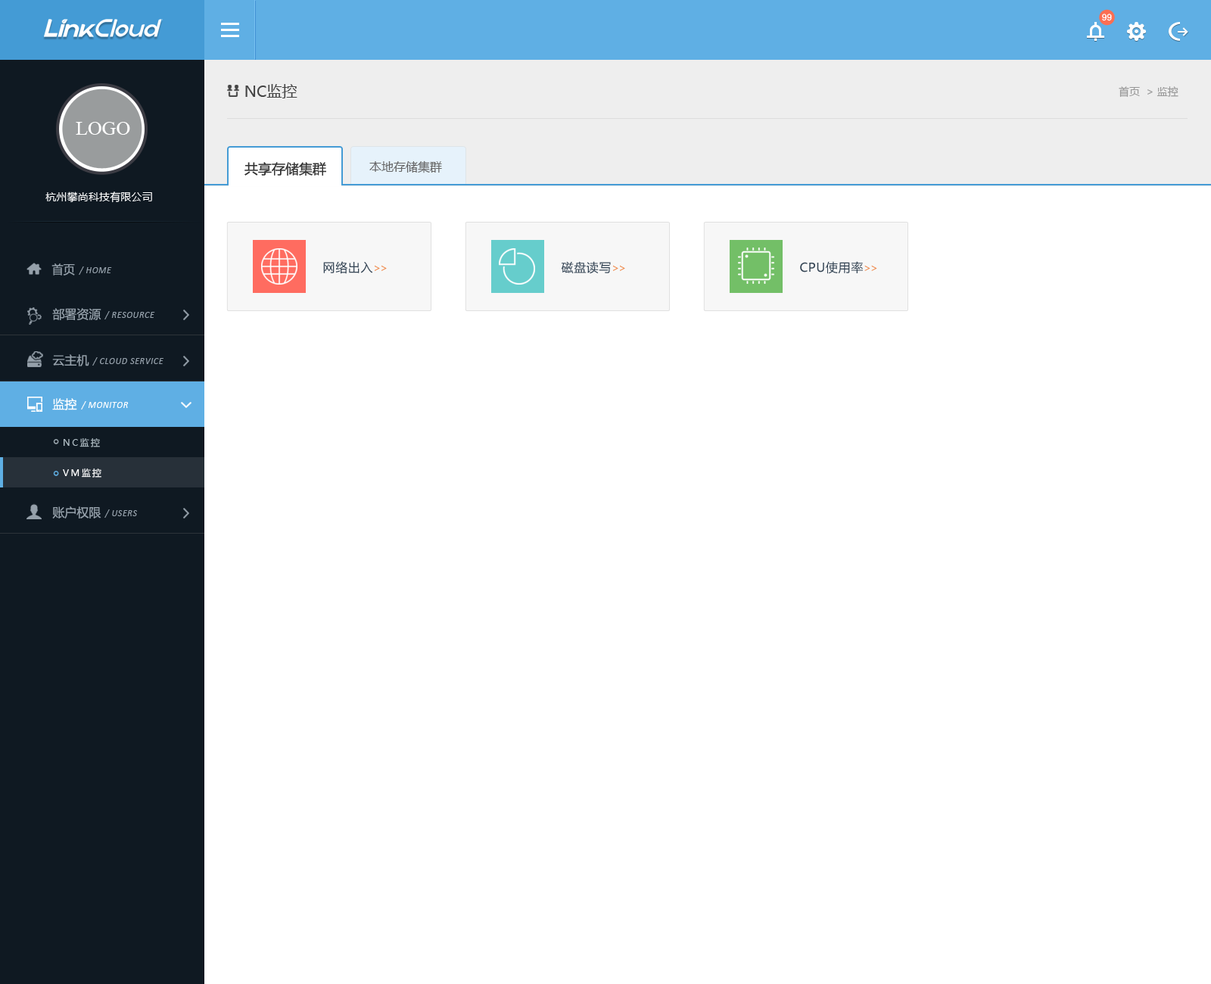
<style>
.page{position:relative;width:1211px;height:984px;background:#ffffff}
.page>*{position:absolute;margin:0}
.t1{font:9.1px "ArialMT";color:#ffffff}
.t2{font:15.1px "MicrosoftYaHei";color:#444444}
.t3{font:10.6px "MicrosoftYaHei";color:#999999}
.t4{font:19.7px "TimesNewRomanPSMT";color:#ffffff}
.t5{font:12.1px "MicrosoftYaHei";color:#666666}
.t6{font:13.6px "MicrosoftYaHei";color:#333333}
.t7{font:10.6px "MicrosoftYaHei";letter-spacing:0.01em;color:#ffffff}
.t8{font:12.1px "MicrosoftYaHei";color:#95a0aa;scale:0.96 1}
.t9{font:9.1px "Calibri-Italic";letter-spacing:0.05em;color:#95a0aa}
.t10{font:12.1px "MicrosoftYaHei";letter-spacing:0.04em;color:#334353}
.t11{font:10.6px "MicrosoftYaHei";letter-spacing:-0.1em;color:#ef8748}
.t12{font:12.1px "MicrosoftYaHei";color:#95a0aa}
.t13{font:9.1px "Calibri-Italic";letter-spacing:0.05em;color:#95a0aa;text-transform:uppercase}
.t14{font:12.1px "MicrosoftYaHei";color:#ffffff}
.t15{font:9.1px "Calibri-Italic";letter-spacing:0.05em;color:#ffffff;text-transform:uppercase}
.t16{font:9.1px "Calibri-Italic";letter-spacing:0.05em;color:#ffffff}
.t17{font:9.1px/30.3px "MicrosoftYaHei";letter-spacing:0.2em;color:#b0bdc4}
.t18{font:9.1px/30.3px "MicrosoftYaHei";letter-spacing:0.2em;color:#ffffff}
</style>
<div class="page">
<p class="t1" style="left:1102px;top:14px;width:10px;height:7px">99</p>
<p class="t2" style="left:245px;top:84px;width:53px;height:14px">NC监控</p>
<p class="t3" style="left:1119px;top:86px;width:60px;height:11px">首页  &gt; 监控</p>
<p class="t4" style="left:76px;top:122px;width:54px;height:13px">LOGO</p>
<p class="t5" style="left:369px;top:161px;width:73px;height:12px">本地存储集群</p>
<p class="t6" style="left:245px;top:162px;width:81px;height:14px">共享存储集群</p>
<p class="t7" style="left:45px;top:192px;width:107px;height:11px">杭州攀尚科技有限公司</p>
<p class="t8" style="left:51px;top:263px;width:24px;height:13px">首页</p>
<p class="t9" style="left:79px;top:267px;width:33px;height:8px">/ HOME</p>
<p class="t10" style="left:323px;top:261px;width:64px;height:13px">网络出入<span class="t11">&gt;&gt;</span></p>
<p class="t10" style="left:561px;top:261px;width:64px;height:13px">磁盘读写<span class="t11">&gt;&gt;</span></p>
<p class="t10" style="left:800px;top:261px;width:78px;height:13px">CPU使用率<span class="t11">&gt;&gt;</span></p>
<p class="t12" style="left:52px;top:308px;width:49px;height:12px">部署资源</p>
<p class="t13" style="left:104px;top:311px;width:51px;height:9px"><span class="t9">/ </span>resource</p>
<p class="t12" style="left:52px;top:354px;width:37px;height:12px">云主机</p>
<p class="t13" style="left:92px;top:357px;width:72px;height:9px"><span class="t9">/ </span>cloud service</p>
<p class="t14" style="left:52px;top:398px;width:25px;height:12px">监控</p>
<p class="t15" style="left:81px;top:401px;width:48px;height:9px"><span class="t16">/ </span>monitor</p>
<p class="t17" style="left:63px;top:438px;width:38px;height:40px">NC监控<br><span class="t18">VM监控<br></span>基础资源</p>
<p class="t12" style="left:52px;top:507px;width:49px;height:12px">账户权限</p>
<p class="t13" style="left:104px;top:510px;width:33px;height:8px"><span class="t9">/ </span>users</p>
</div>
